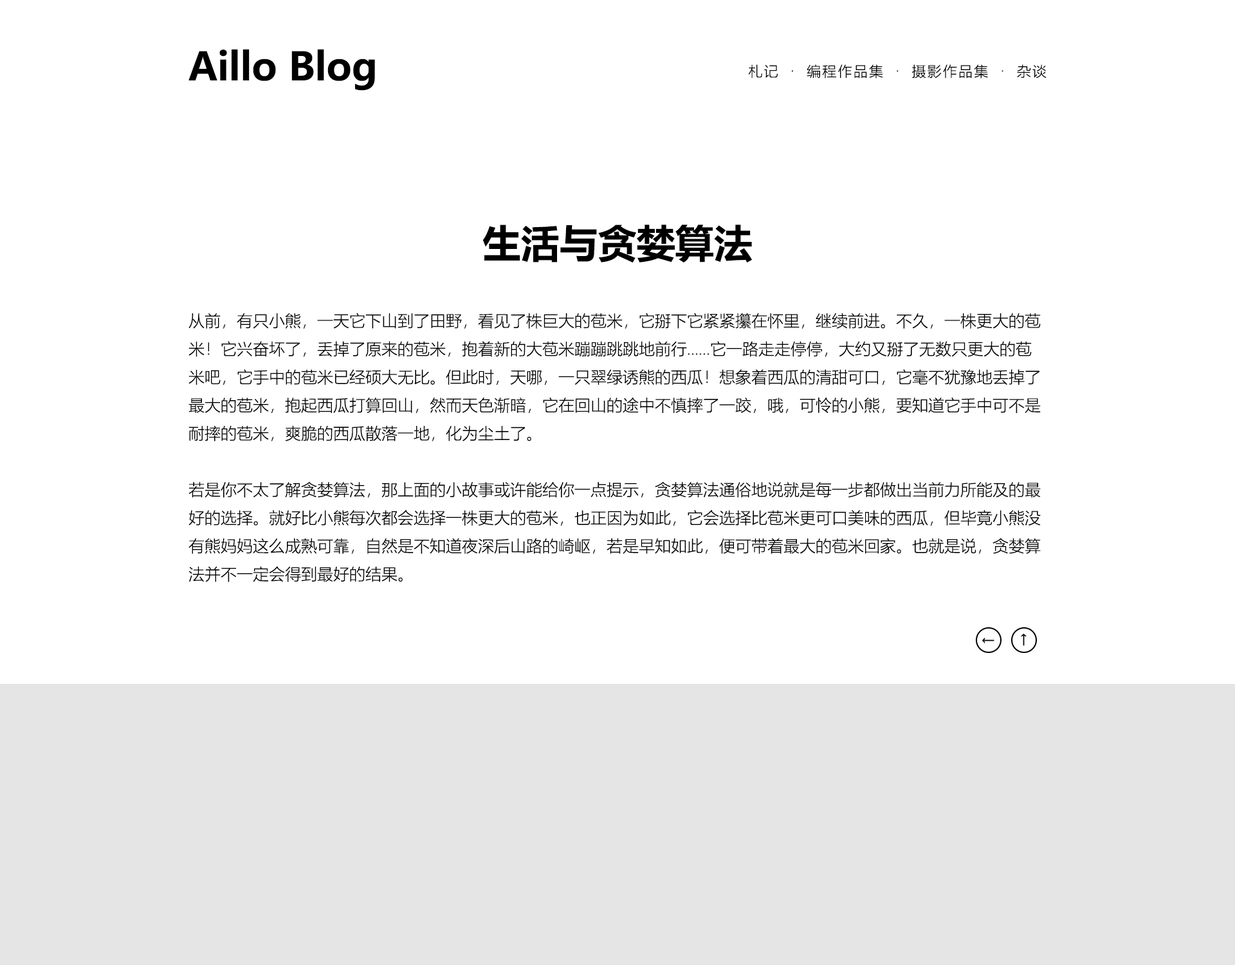
<style>
.page{position:relative;width:1235px;height:965px;background:#ffffff}
.page>*{position:absolute;margin:0}
.t1{font:38.6px "MicrosoftYaHei-Bold";color:#000000}
.t2{font:14.2px "MicrosoftYaHeiLight";letter-spacing:0.1em;color:#000000}
.t3{font:16.1px "MicrosoftYaHeiLight";color:#000000}
</style>
<div class="page">
<p class="t1" style="left:189px;top:49px;width:186px;height:42px">Aillo Blog</p>
<p class="t2" style="left:748px;top:64px;width:299px;height:15px">札记  ·  编程作品集  ·  摄影作品集  ·  杂谈</p>
<p class="t1" style="left:483px;top:225px;width:269px;height:38px">生活与贪婪算法</p>
<p class="t3" style="left:189px;top:313px;width:852px;height:269px">从前，有只小熊，一天它下山到了田野，看见了株巨大的苞米，它掰下它紧紧攥在怀里，继续前进。不久，一株更大的苞米！它兴奋坏了，丢掉了原来的苞米，抱着新的大苞米蹦蹦跳跳地前行……它一路走走停停，大约又掰了无数只更大的苞米吧，它手中的苞米已经硕大无比。但此时，天哪，一只翠绿诱熊的西瓜！想象着西瓜的清甜可口，它毫不犹豫地丢掉了最大的苞米，抱起西瓜打算回山，然而天色渐暗，它在回山的途中不慎摔了一跤，哦，可怜的小熊，要知道它手中可不是耐摔的苞米，爽脆的西瓜散落一地，化为尘土了。<br><br>若是你不太了解贪婪算法，那上面的小故事或许能给你一点提示，贪婪算法通俗地说就是每一步都做出当前力所能及的最好的选择。就好比小熊每次都会选择一株更大的苞米，也正因为如此，它会选择比苞米更可口美味的西瓜，但毕竟小熊没有熊妈妈这么成熟可靠，自然是不知道夜深后山路的崎岖，若是早知如此，便可带着最大的苞米回家。也就是说，贪婪算法并不一定会得到最好的结果。</p>
<p class="t3" style="left:982px;top:638px;width:13px;height:5px">←</p>
<p class="t3" style="left:1021px;top:633px;width:6px;height:13px;rotate:90deg">←</p>
</div>
